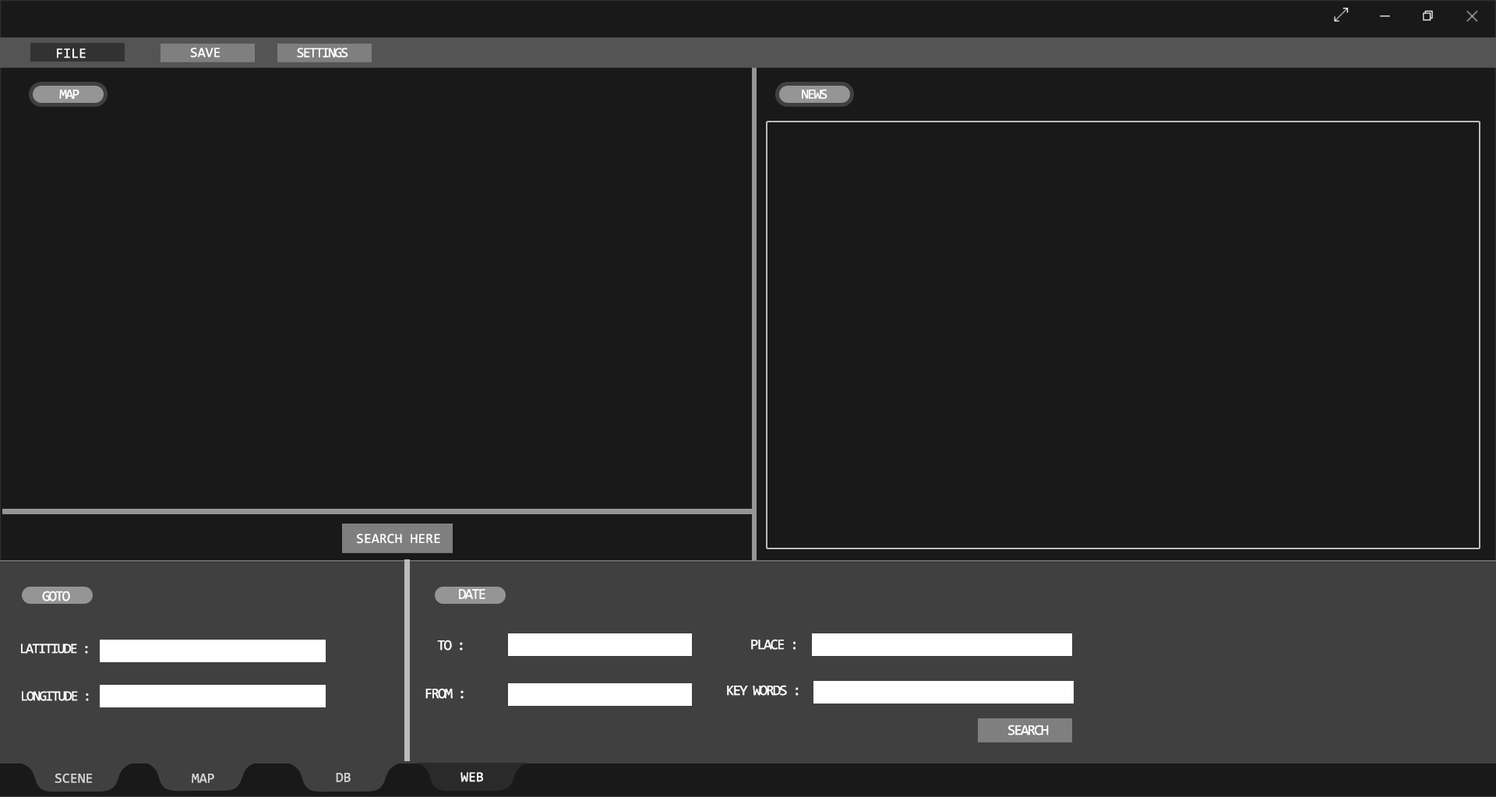
<style>
.page{position:relative;width:1496px;height:797px;background:#191919}
.page>*{position:absolute;margin:0}
.t1{font:14px "Consolas";color:#ffffff}
.t2{font:14px "Consolas";letter-spacing:-0.1em;color:#ffffff}
.t3{font:14.8px "Consolas";letter-spacing:-0.1em;color:#ffffff}
.t4{font:14px "Consolas";color:#d7d7d7}
</style>
<div class="page">
<p class="t1" style="left:57px;top:48px;width:29px;height:10px">FILE</p>
<p class="t1" style="left:190px;top:48px;width:30px;height:10px">SAVE</p>
<p class="t2" style="left:297px;top:48px;width:51px;height:10px">SETTINGS</p>
<p class="t2" style="left:59px;top:90px;width:20px;height:9px">MAP</p>
<p class="t2" style="left:802px;top:89px;width:25px;height:10px">NEWS</p>
<p class="t1" style="left:357px;top:534px;width:83px;height:10px">SEARCH HERE</p>
<p class="t3" style="left:42px;top:591px;width:28px;height:11px">GOTO</p>
<p class="t3" style="left:459px;top:589px;width:26px;height:10px">DATE</p>
<p class="t3" style="left:437px;top:640px;width:26px;height:11px">TO :</p>
<p class="t3" style="left:751px;top:639px;width:45px;height:11px">PLACE :</p>
<p class="t2" style="left:21px;top:644px;width:67px;height:10px">LATITIUDE :</p>
<p class="t3" style="left:425px;top:688px;width:39px;height:11px">FROM :</p>
<p class="t3" style="left:727px;top:685px;width:72px;height:11px">KEY WORDS :</p>
<p class="t2" style="left:22px;top:691px;width:67px;height:10px">LONGITUDE :</p>
<p class="t3" style="left:1008px;top:725px;width:41px;height:11px">SEARCH</p>
<p class="t4" style="left:55px;top:773px;width:37px;height:10px">SCENE</p>
<p class="t4" style="left:192px;top:774px;width:22px;height:9px">MAP</p>
<p class="t4" style="left:336px;top:773px;width:15px;height:9px">DB</p>
<p class="t1" style="left:460px;top:772px;width:23px;height:10px">WEB</p>
</div>
